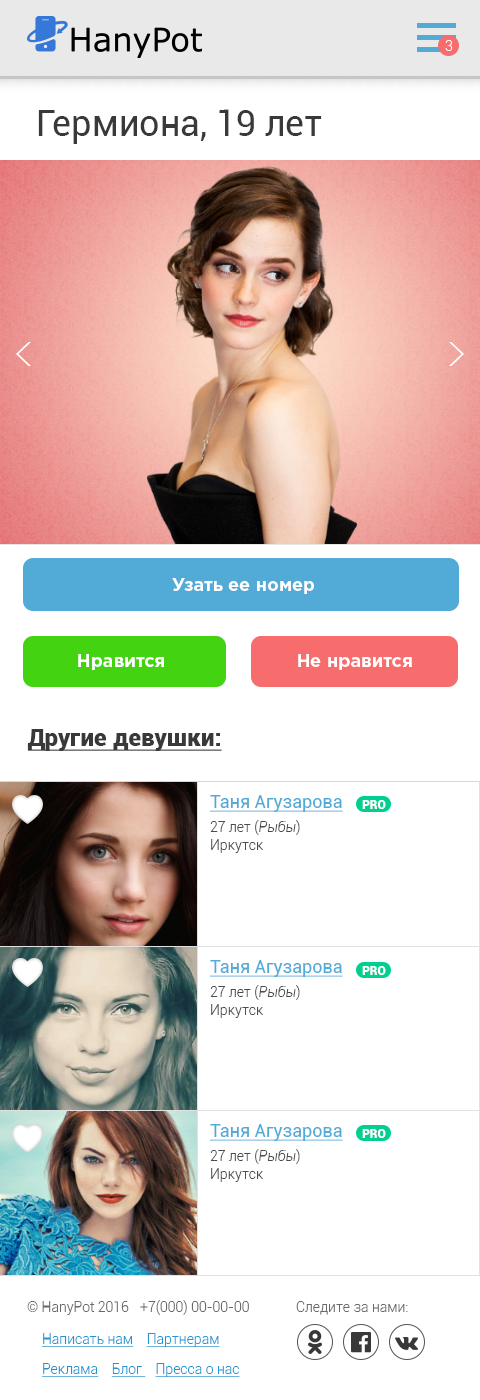
<style>
.page{position:relative;width:480px;height:1400px;background:#ffffff}
.page>*{position:absolute;margin:0}
.t1{font:14px "Roboto-Light";color:#ffffff}
.t2{font:36px "Roboto-Regular";color:#393939}
.t3{font:18px "GothamPro-Bold";color:#ffffff}
.t4{font:24px "Roboto-Black";color:#393939;text-decoration:underline}
.t5{font:18px/24px "Roboto-Regular";color:#52aad7;text-decoration:underline}
.t6{font:14px/24px "Roboto-Light";color:#4c4c4c}
.t7{font:14px/24px "Roboto-LightItalic";color:#4c4c4c}
.t8{font:14px/18px "Roboto-Light";color:#4c4c4c}
.t9{font:12px "Roboto-Black";color:#ffffff;text-transform:uppercase}
.t10{font:14px "Roboto-Light";color:#696969}
.t11{font:14px/30px "Roboto-Light";color:#2196d1;text-decoration:underline}
.t12{font:14px "Roboto-Light";color:#2196d1;text-decoration:underline}
</style>
<div class="page">
<p class="t1" style="left:445px;top:40px;width:8px;height:11px">3</p>
<p class="t2" style="left:38px;top:109px;width:284px;height:35px">Гермиона, 19 лет</p>
<p class="t3" style="left:172px;top:578px;width:142px;height:16px">Узать ее номер</p>
<p class="t3" style="left:78px;top:654px;width:86px;height:16px">Нравится</p>
<p class="t3" style="left:298px;top:654px;width:114px;height:16px">Не нравится</p>
<p class="t4" style="left:27px;top:729px;width:195px;height:22px">Другие девушки:</p>
<p class="t5" style="left:210px;top:795px;width:133px;height:58px">Таня Агузарова<br><span class="t6">27 лет (</span><span class="t7">Рыбы</span><span class="t6">)<br></span><span class="t8">Иркутск</span></p>
<p class="t9" style="left:362px;top:800px;width:24px;height:9px">pro</p>
<p class="t5" style="left:210px;top:960px;width:133px;height:58px">Таня Агузарова<br><span class="t6">27 лет (</span><span class="t7">Рыбы</span><span class="t6">)<br></span><span class="t8">Иркутск</span></p>
<p class="t9" style="left:362px;top:966px;width:24px;height:9px">pro</p>
<p class="t5" style="left:210px;top:1124px;width:133px;height:58px">Таня Агузарова<br><span class="t6">27 лет (</span><span class="t7">Рыбы</span><span class="t6">)<br></span><span class="t8">Иркутск</span></p>
<p class="t9" style="left:362px;top:1129px;width:24px;height:9px">pro</p>
<p class="t10" style="left:27px;top:1301px;width:102px;height:14px">© HanyPot 2016</p>
<p class="t10" style="left:140px;top:1300px;width:109px;height:15px">+7(000) 00-00-00</p>
<p class="t10" style="left:296px;top:1301px;width:112px;height:14px">Следите за нами:</p>
<p class="t11" style="left:42px;top:1333px;width:198px;height:44px"><span class="t12">Написать нам    </span>Партнерам    <br>Реклама    Блог    Пресса о нас</p>
</div>
